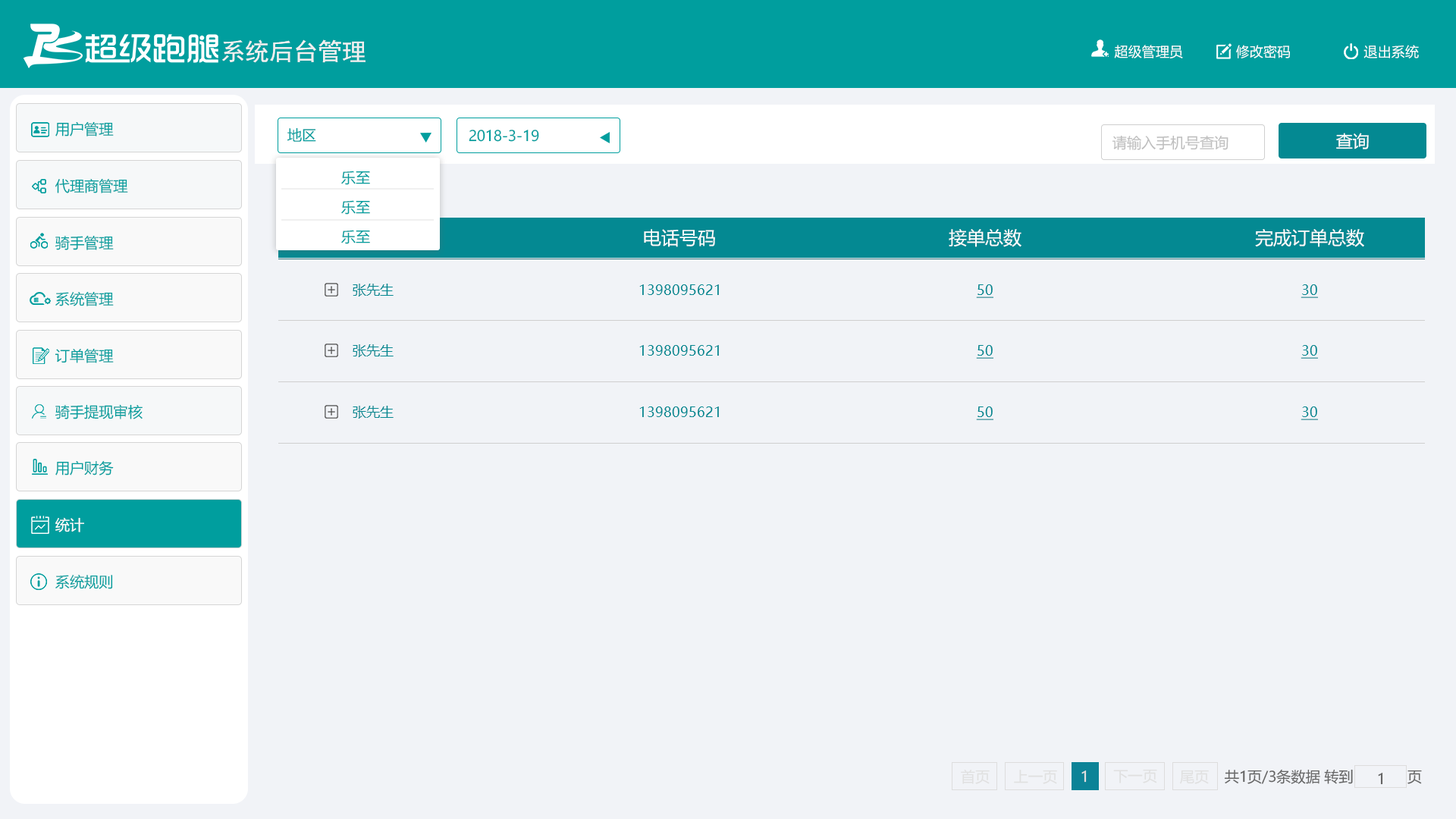
<style>
.page{position:relative;width:1456px;height:819px;background:#f1f3f7}
.page>*{position:absolute;margin:0}
.t1{font:24.4px "SimHei";color:#f0f0f0}
.t2{font:13.7px "MicrosoftYaHei";color:#ffffff}
.t3{font:14.5px "MicrosoftYaHei";color:#009e9e}
.t4{font:14.5px "MicrosoftYaHei";color:#bebebe}
.t5{font:16.6px "MicrosoftYaHei";color:#ffffff}
.t6{font:18.2px "MicrosoftYaHei";color:#ffffff}
.t7{font:13.6px "MicrosoftYaHei";color:#048992}
.t8{font:13.6px "MicrosoftYaHei";color:#048992;text-decoration:underline}
.t9{font:14.5px "MicrosoftYaHei";color:#ffffff}
.t10{font:14.5px "MicrosoftYaHei";color:#e0e0e0}
.t11{font:14.5px "MicrosoftYaHei";color:#646464}
</style>
<div class="page">
<p class="t1" style="left:222px;top:39px;width:144px;height:24px">系统后台管理</p>
<p class="t2" style="left:1114px;top:45px;width:305px;height:13px">超级管理员             修改密码                  退出系统</p>
<p class="t3" style="left:55px;top:121px;width:59px;height:15px">用户管理</p>
<p class="t3" style="left:287px;top:127px;width:29px;height:15px">地区</p>
<p class="t3" style="left:469px;top:130px;width:70px;height:12px">2018-3-19</p>
<p class="t4" style="left:1112px;top:135px;width:116px;height:15px">请输入手机号查询</p>
<p class="t5" style="left:1336px;top:133px;width:33px;height:16px">查询</p>
<p class="t3" style="left:341px;top:171px;width:29px;height:14px">乐至</p>
<p class="t3" style="left:55px;top:178px;width:73px;height:15px">代理商管理</p>
<p class="t3" style="left:341px;top:200px;width:29px;height:15px">乐至</p>
<p class="t3" style="left:341px;top:230px;width:29px;height:14px">乐至</p>
<p class="t6" style="left:644px;top:229px;width:71px;height:18px">电话号码</p>
<p class="t6" style="left:949px;top:229px;width:72px;height:18px">接单总数</p>
<p class="t6" style="left:1255px;top:229px;width:109px;height:18px">完成订单总数</p>
<p class="t3" style="left:55px;top:235px;width:59px;height:15px">骑手管理</p>
<p class="t3" style="left:55px;top:291px;width:59px;height:15px">系统管理</p>
<p class="t7" style="left:353px;top:284px;width:41px;height:13px">张先生</p>
<p class="t7" style="left:639px;top:284px;width:80px;height:11px">1398095621</p>
<p class="t8" style="left:976px;top:284px;width:17px;height:14px">50</p>
<p class="t8" style="left:1301px;top:284px;width:17px;height:14px">30</p>
<p class="t3" style="left:55px;top:348px;width:59px;height:15px">订单管理</p>
<p class="t7" style="left:353px;top:344px;width:41px;height:13px">张先生</p>
<p class="t7" style="left:639px;top:345px;width:80px;height:11px">1398095621</p>
<p class="t8" style="left:976px;top:345px;width:17px;height:14px">50</p>
<p class="t8" style="left:1301px;top:345px;width:17px;height:14px">30</p>
<p class="t3" style="left:55px;top:404px;width:88px;height:15px">骑手提现审核</p>
<p class="t7" style="left:353px;top:406px;width:41px;height:13px">张先生</p>
<p class="t7" style="left:639px;top:406px;width:80px;height:11px">1398095621</p>
<p class="t8" style="left:976px;top:406px;width:17px;height:14px">50</p>
<p class="t8" style="left:1301px;top:406px;width:17px;height:14px">30</p>
<p class="t3" style="left:55px;top:460px;width:59px;height:15px">用户财务</p>
<p class="t9" style="left:55px;top:517px;width:29px;height:15px">统计</p>
<p class="t3" style="left:55px;top:574px;width:58px;height:15px">系统规则</p>
<p class="t10" style="left:961px;top:770px;width:29px;height:14px">首页</p>
<p class="t10" style="left:1014px;top:770px;width:43px;height:14px">上一页</p>
<p class="t10" style="left:1081px;top:770px;width:6px;height:13px">1</p>
<p class="t10" style="left:1113px;top:769px;width:44px;height:14px">下一页</p>
<p class="t10" style="left:1180px;top:770px;width:29px;height:14px">尾页</p>
<p class="t11" style="left:1224px;top:769px;width:198px;height:15px">共1页/3条数据 转到             页</p>
<p class="t11" style="left:1378px;top:773px;width:5px;height:12px">1</p>
</div>
